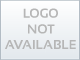
<style>
.page{position:relative;width:80px;height:60px}
.page>*{position:absolute;margin:0}
.t1{font:13px "Sansation-Bold";color:#b6b6b6}
</style>
<div class="page">
<p class="t1" style="left:5px;top:8px;width:71px;height:41px;text-align:center">LOGO<br>NOT<br>AVAILABLE</p>
</div>
